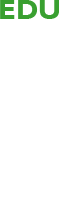
<style>
.page{position:relative;width:59px;height:220px;background:#ffffff}
.page>*{position:absolute;margin:0}
.t1{font:28px "GillSansMT-Bold";color:#39a030}
</style>
<div class="page">
<p class="t1" style="left:0px;top:0px;width:59px;height:19px">EDU</p>
</div>
